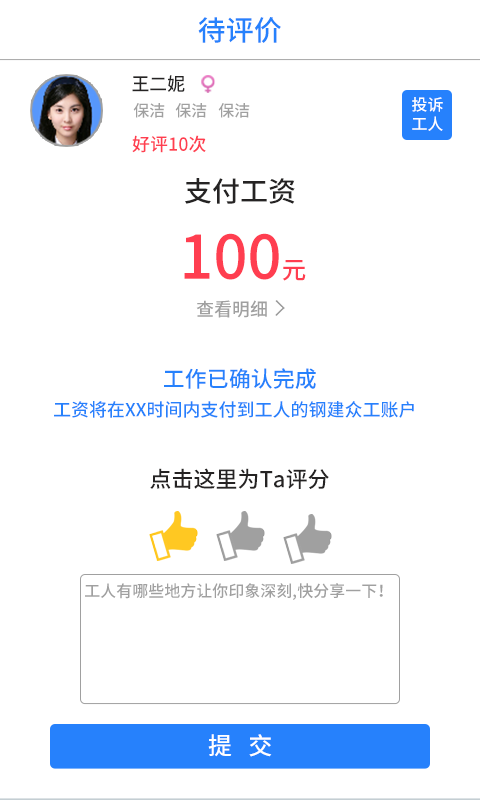
<style>
.page{position:relative;width:480px;height:800px;background:#ffffff}
.page>*{position:absolute;margin:0}
.t1{font:28px "NotoSansHans-Medium";color:#2681fc}
.t2{font:18.3px "NotoSansHans-Medium";color:#252323}
.t3{font:16px "NotoSansHans-Medium";color:#ffffff}
.t4{font:16px "NotoSansHans-Medium";color:#a0a0a0}
.t5{font:18px "NotoSansHans-Medium";color:#ff3e50}
.t6{font:28px "NotoSansHans-Medium";color:#252323}
.t7{font:60px "NotoSansHans-Medium";color:#ff3e50}
.t8{font:24.5px "NotoSansHans-Medium";color:#ff3e50}
.t9{font:22px "NotoSansHans-Medium";color:#2681fc}
.t10{font:18px "NotoSansHans-Medium";color:#2681fc}
.t11{font:22px "NotoSansHans-Medium";color:#252323}
.t12{font:24px "NotoSansHans-Medium";color:#ffffff}
</style>
<div class="page">
<p class="t1" style="left:198px;top:17px;width:83px;height:26px">待评价</p>
<p class="t2" style="left:132px;top:75px;width:53px;height:17px">王二妮</p>
<p class="t3" style="left:412px;top:97px;width:31px;height:34px">投诉<br>工人</p>
<p class="t4" style="left:133px;top:103px;width:32px;height:15px">保洁</p>
<p class="t4" style="left:175px;top:103px;width:32px;height:15px">保洁</p>
<p class="t4" style="left:218px;top:103px;width:32px;height:15px">保洁</p>
<p class="t5" style="left:132px;top:135px;width:74px;height:18px">好评10次</p>
<p class="t6" style="left:185px;top:178px;width:110px;height:26px">支付工资</p>
<p class="t7" style="left:184px;top:233px;width:122px;height:48px">100<span class="t8">元</span></p>
<p class="t9" style="left:164px;top:368px;width:152px;height:21px">工作已确认完成</p>
<p class="t10" style="left:54px;top:401px;width:360px;height:17px">工资将在XX时间内支付到工人的钢建众工账户</p>
<p class="t11" style="left:150px;top:468px;width:179px;height:21px">点击这里为Ta评分</p>
<p class="t4" style="left:85px;top:583px;width:298px;height:17px">工人有哪些地方让你印象深刻,快分享一下！</p>
<p class="t12" style="left:208px;top:734px;width:64px;height:23px">提   交</p>
</div>
